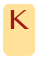
<style>
.page{position:relative;width:40px;height:60px;background:#ffe199}
.page>*{position:absolute;margin:0}
.t1{font:28.2px "OriyaMN";color:#a41717}
</style>
<div class="page">
<p class="t1" style="left:10px;top:10px;width:19px;height:19px">K</p>
</div>
